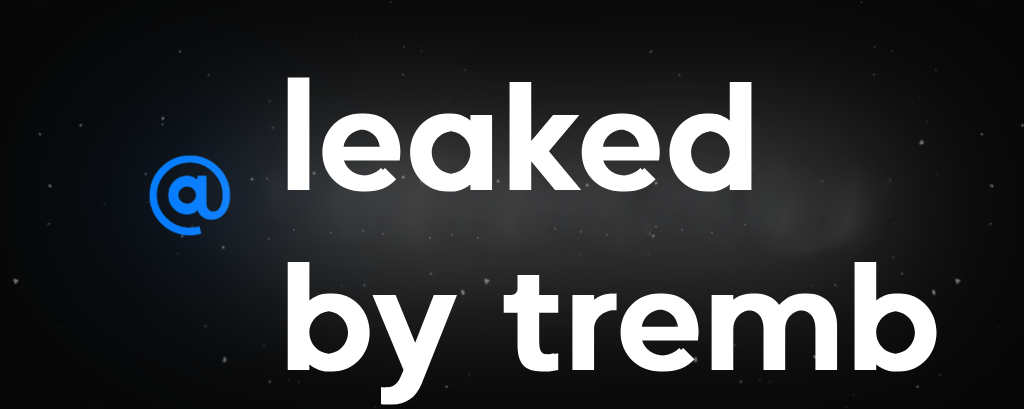
<style>
.page{position:relative;width:1024px;height:409px}
.page>*{position:absolute;margin:0}
.t1{font:150px "MusticaPro-SemiBold";color:#ffffff;font-weight:bold}
</style>
<div class="page">
<p class="t1" style="left:287px;top:77px;width:650px;height:328px">leaked <br>by tremb</p>
</div>
